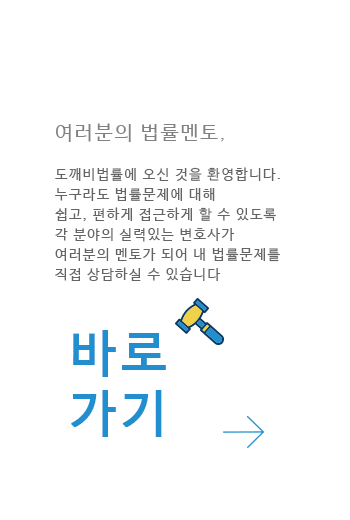
<style>
.page{position:relative;width:350px;height:520px;background:#ffffff}
.page>*{position:absolute;margin:0}
.t1{font:14px/20px "NanumBarunGothic";letter-spacing:0.1em;color:#646464}
.t2{font:20px "NanumBarunGothic";letter-spacing:0.1em;color:#818181}
.t3{font:16px "NanumBarunGothic";letter-spacing:0.1em;color:#818181}
.t4{font:14px/40px "NanumBarunGothic";letter-spacing:0.1em;color:#646464}
.t5{font:50px "NanumBarunGothic";letter-spacing:0.1em;color:#208ecf;font-weight:bold}
</style>
<div class="page">
<p class="t1" style="left:55px;top:123px;width:225px;height:158px"><span class="t2">여러분의 법률멘토</span><span class="t3">, <br></span><span class="t4">도깨비법률에 오신 것을 환영합니다.<br></span>누구라도 법률문제에 대해  <br>쉽고, 편하게 접근하게 할 수 있도록<br>각 분야의 실력있는 변호사가 <br>여러분의 멘토가 되어 내 법률문제를 <br>직접 상담하실 수 있습니다</p>
<p class="t5" style="left:71px;top:330px;width:95px;height:107px">바로<br>가기</p>
</div>
